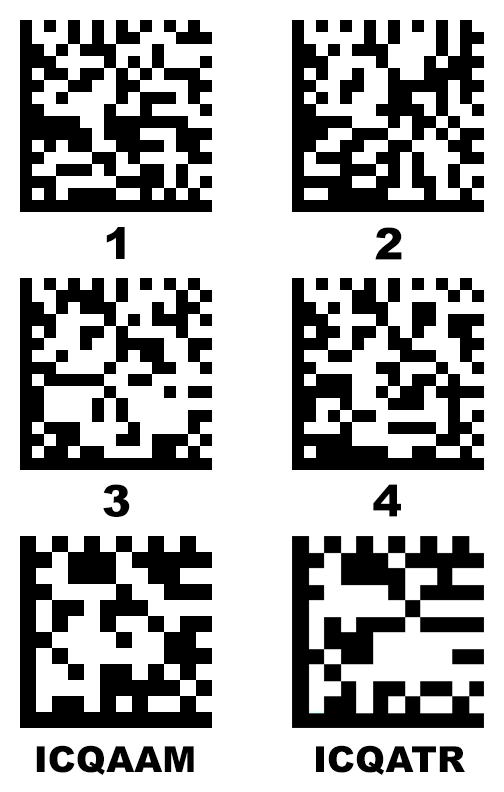
<style>
.page{position:relative;width:504px;height:792px;background:#ffffff}
.page>*{position:absolute;margin:0}
.t1{font:44px "Arial-Black";color:#000000}
.t2{font:36px "Arial-Black";color:#000000}
</style>
<div class="page">
<p class="t1" style="left:106px;top:227px;width:19px;height:32px">1</p>
<p class="t1" style="left:375px;top:227px;width:27px;height:33px">2</p>
<p class="t1" style="left:103px;top:484px;width:27px;height:33px">3</p>
<p class="t1" style="left:373px;top:484px;width:28px;height:33px">4</p>
<p class="t2" style="left:36px;top:745px;width:158px;height:30px">ICQAAM</p>
<p class="t2" style="left:316px;top:745px;width:149px;height:30px">ICQATR</p>
</div>
